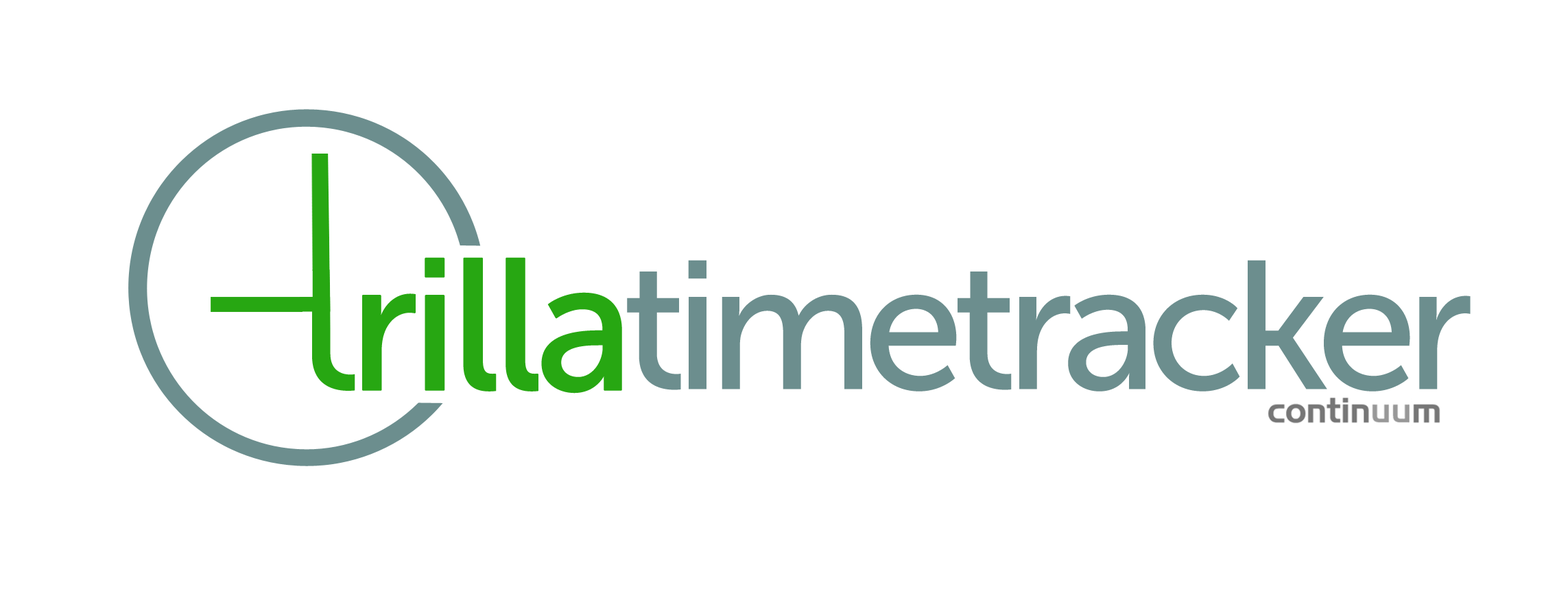
<style>
.page{position:relative;width:1568px;height:615px;background:#ffffff}
.page>*{position:absolute;margin:0}
.t1{font:186.6px "MuseoSans-500";letter-spacing:-0.065em;color:#27a712;font-weight:bold}
.t2{font:186.6px "MuseoSans-500";letter-spacing:-0.065em;color:#27a712}
.t3{font:182px "MuseoSans-500";letter-spacing:-0.065em;color:#6d8e8e}
</style>
<div class="page">
<p class="t1" style="left:300px;top:257px;width:322px;height:137px"><span class="t2">t</span>rilla</p>
<p class="t3" style="left:627px;top:260px;width:844px;height:132px">timetracker</p>
</div>
